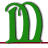
<style>
.page{position:relative;width:48px;height:48px;background:#ffffff}
.page>*{position:absolute;margin:0}
.t1{font:40.6px "Darkenstone";letter-spacing:0.08em;color:#1c8a13;font-variant:small-caps;scale:0.86 1}
</style>
<div class="page">
<p class="t1" style="left:5px;top:2px;width:37px;height:41px">M</p>
</div>
